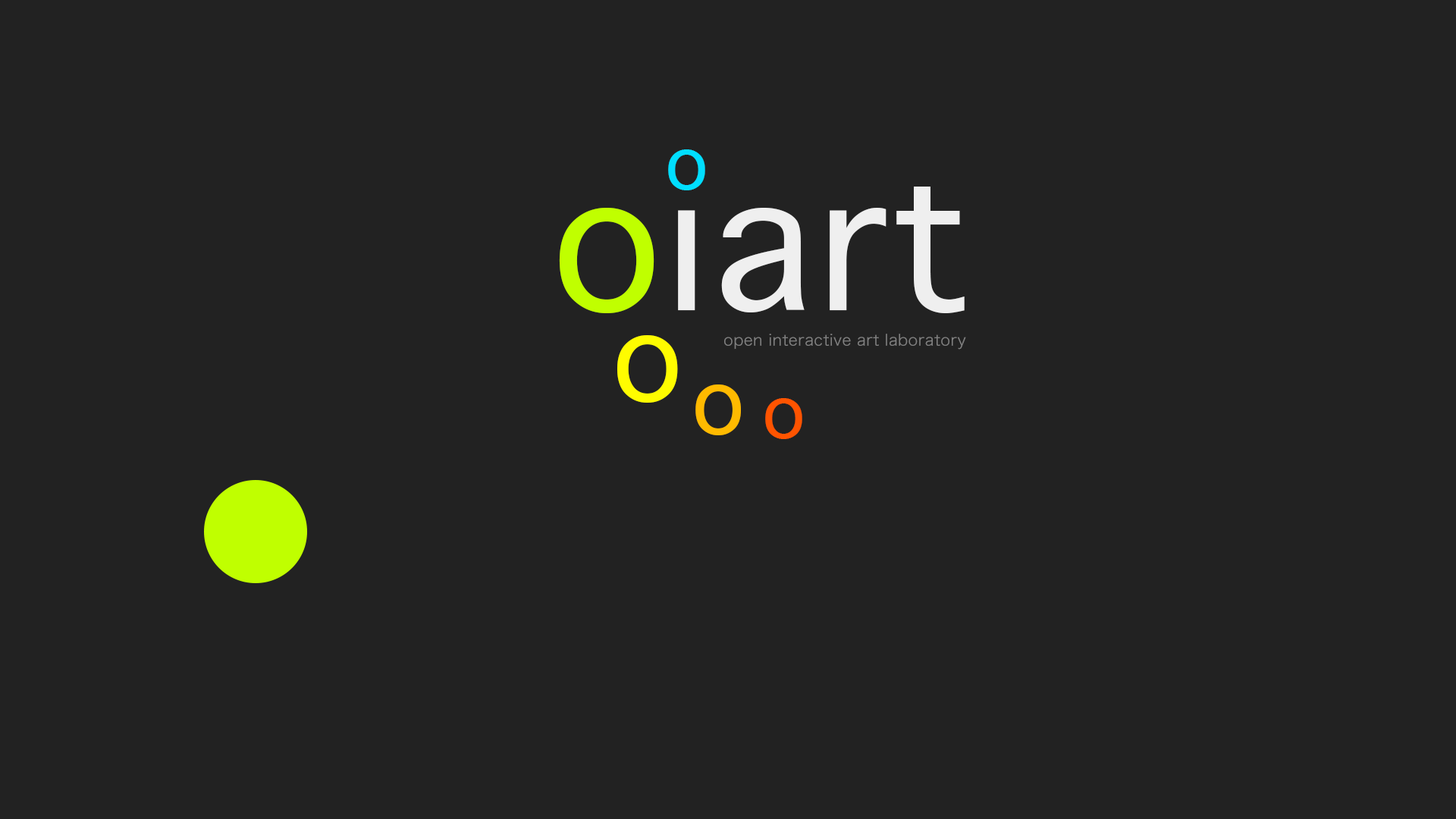
<style>
.page{position:relative;width:1456px;height:819px;background:#222222}
.page>*{position:absolute;margin:0}
.t1{font:71.4px "Sathu";letter-spacing:0.02em;color:#00deff}
.t2{font:182.5px "Sathu";letter-spacing:0.02em;color:#efefef}
.t3{font:182.5px "Sathu";letter-spacing:0.02em;color:#c0ff00}
.t4{font:116.5px "Sathu";letter-spacing:0.02em;color:#fffc00}
.t5{font:15.4px "HiraginoSansGB-W3";letter-spacing:0.02em;color:#818181}
.t6{font:88px "Sathu";letter-spacing:0.02em;color:#ffba00}
.t7{font:71.4px "Sathu";letter-spacing:0.02em;color:#ff5400}
</style>
<div class="page">
<p class="t1" style="left:668px;top:149px;width:37px;height:41px">o</p>
<p class="t2" style="left:559px;top:171px;width:406px;height:142px"><span class="t3">o</span>iart</p>
<p class="t4" style="left:617px;top:335px;width:61px;height:68px">o</p>
<p class="t5" style="left:724px;top:334px;width:242px;height:16px">open interactive art laboratory</p>
<p class="t6" style="left:695px;top:384px;width:46px;height:51px">o</p>
<p class="t7" style="left:765px;top:398px;width:37px;height:41px">o</p>
</div>
